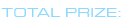
<style>
.page{position:relative;width:122px;height:25px;background:#ffffff}
.page>*{position:absolute;margin:0}
.t1{font:14px "MicrogrammaD-MediExte";letter-spacing:0.075em;color:#8dd9ff;text-transform:uppercase}
</style>
<div class="page">
<p class="t1" style="left:1px;top:8px;width:120px;height:9px">Total Prize:</p>
</div>
